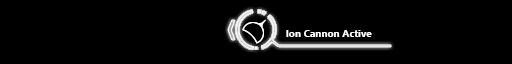
<style>
.page{position:relative;width:512px;height:64px;background:#000000}
.page>*{position:absolute;margin:0}
.t1{font:10px "LeelawadeeUI-Bold";color:#ffffff}
</style>
<div class="page">
<p class="t1" style="left:286px;top:30px;width:86px;height:7px">Ion Cannon Active</p>
</div>
